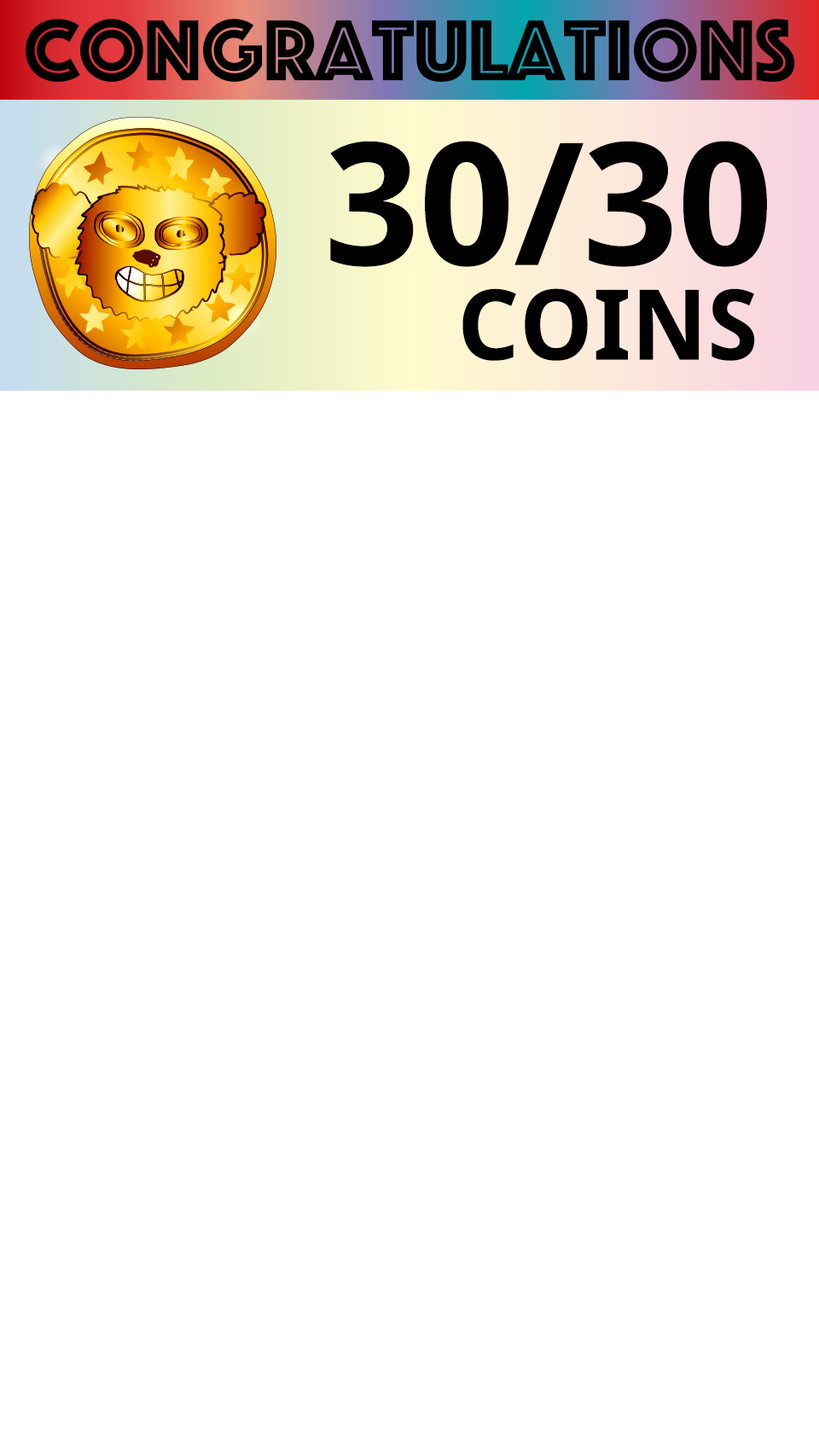
<style>
.page{position:relative;width:819px;height:1456px;background:#ffffff}
.page>*{position:absolute;margin:0}
.t1{font:170.6px "DroidSans-Bold";color:#000000}
.t2{font:97.5px "DroidSans-Bold";color:#000000}
</style>
<div class="page">
<p class="t1" style="left:330px;top:141px;width:437px;height:126px">30/30</p>
<p class="t2" style="left:462px;top:288px;width:293px;height:73px">COINS</p>
</div>
